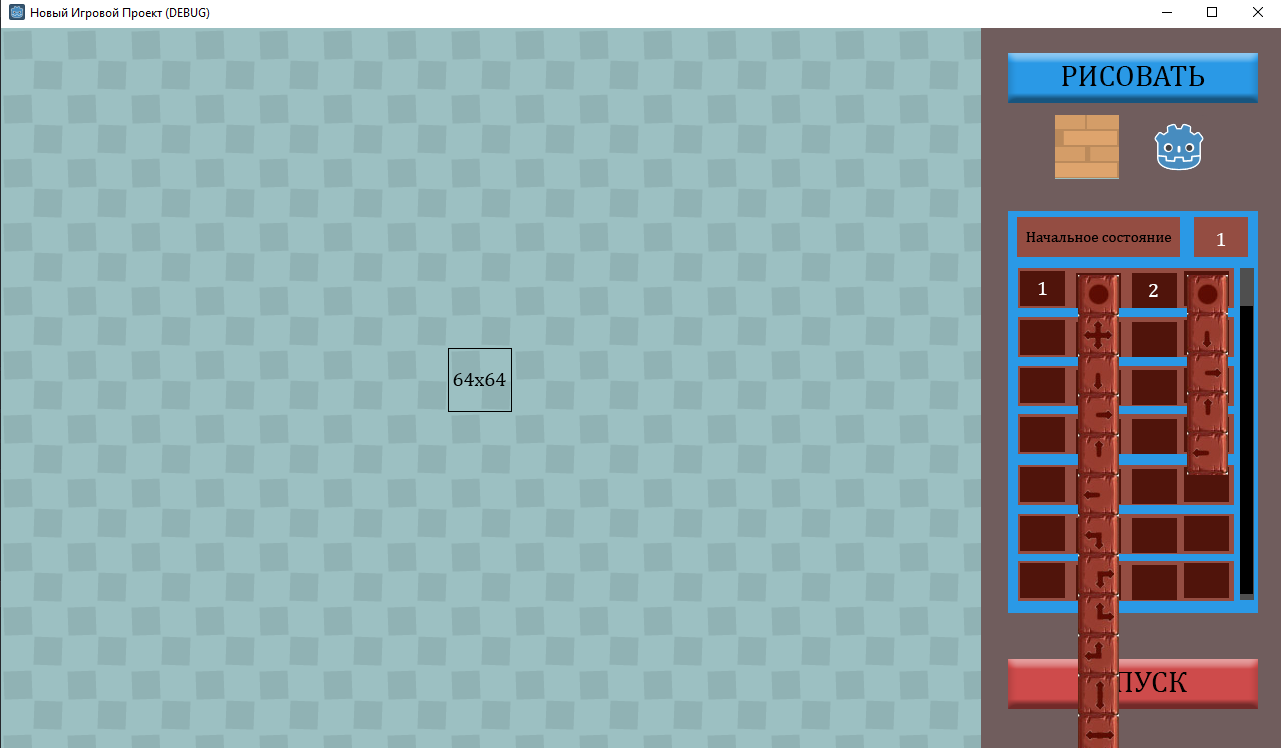
<style>
.page{position:relative;width:1281px;height:748px;background:#9cc0c2}
.page>*{position:absolute;margin:0}
.t1{font:30px "Cambria";color:#000000}
.t2{font:15px "Cambria";color:#000000}
.t3{font:20px "Cambria";color:#ffffff}
.t4{font:20px "Cambria";color:#000000}
.t5{font:30px "Cambria"}
</style>
<div class="page">
<p class="t1" style="left:1062px;top:66px;width:143px;height:20px">РИСОВАТЬ</p>
<p class="t2" style="left:1026px;top:232px;width:146px;height:10px">Начальное состояние</p>
<p class="t3" style="left:1217px;top:233px;width:9px;height:13px">1</p>
<p class="t3" style="left:1038px;top:282px;width:9px;height:13px">1</p>
<p class="t3" style="left:1149px;top:284px;width:9px;height:13px">2</p>
<p class="t4" style="left:453px;top:373px;width:53px;height:13px"><span class="t3"><br></span> 64x64</p>
<p class="t5" style="left:1080px;top:672px;width:107px;height:20px">ЗАПУСК</p>
</div>
